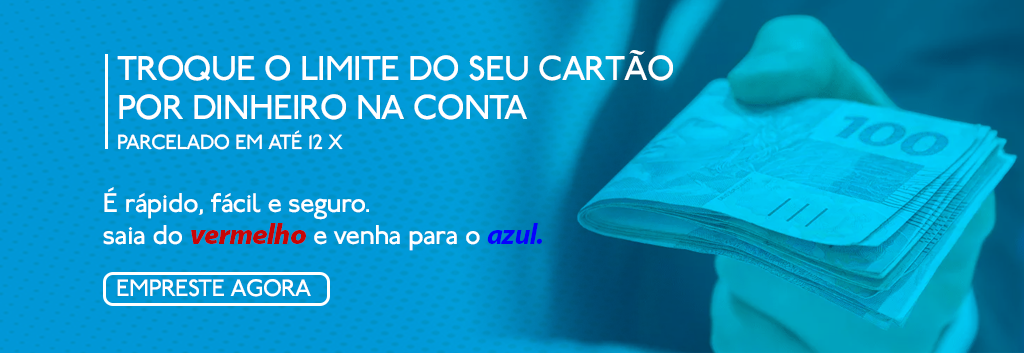
<style>
.page{position:relative;width:1024px;height:353px}
.page>*{position:absolute;margin:0}
.t1{font:36.5px "P22Underground";letter-spacing:-0.025em;color:#ffffff}
.t2{font:21.5px "P22Underground";letter-spacing:-0.025em;color:#ffffff}
.t3{font:28.6px "P22Underground";letter-spacing:-0.025em;color:#ffffff}
.t4{font:28.6px "MyriadPro-BlackIt";letter-spacing:-0.025em;color:#c60505}
.t5{font:28.6px "MyriadPro-BoldIt";letter-spacing:-0.025em;color:#0600ff}
.t6{font:25px "P22Underground";letter-spacing:-0.025em;color:#ffffff}
</style>
<div class="page">
<p class="t1" style="left:117px;top:50px;width:556px;height:31px">TROQUE O LIMITE DO SEU CARTÃO</p>
<p class="t1" style="left:119px;top:94px;width:408px;height:26px">POR DINHEIRO NA CONTA</p>
<p class="t2" style="left:118px;top:130px;width:225px;height:20px">PARCELADO EM ATÉ 12 X</p>
<p class="t3" style="left:104px;top:187px;width:265px;height:33px">É rápido, fácil e seguro.</p>
<p class="t3" style="left:103px;top:223px;width:439px;height:28px">saia do <span class="t4">vermelho</span> e venha para o <span class="t5">azul.</span></p>
<p class="t6" style="left:117px;top:279px;width:194px;height:18px">EMPRESTE AGORA</p>
</div>
